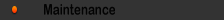
<style>
.page{position:relative;width:224px;height:20px;background:#333333}
.page>*{position:absolute;margin:0}
.t1{font:14.9px "ArialRoundedMTBold";color:#030303;scale:0.78 1}
</style>
<div class="page">
<p class="t1" style="left:44px;top:4px;width:71px;height:11px">Maintenance</p>
</div>
